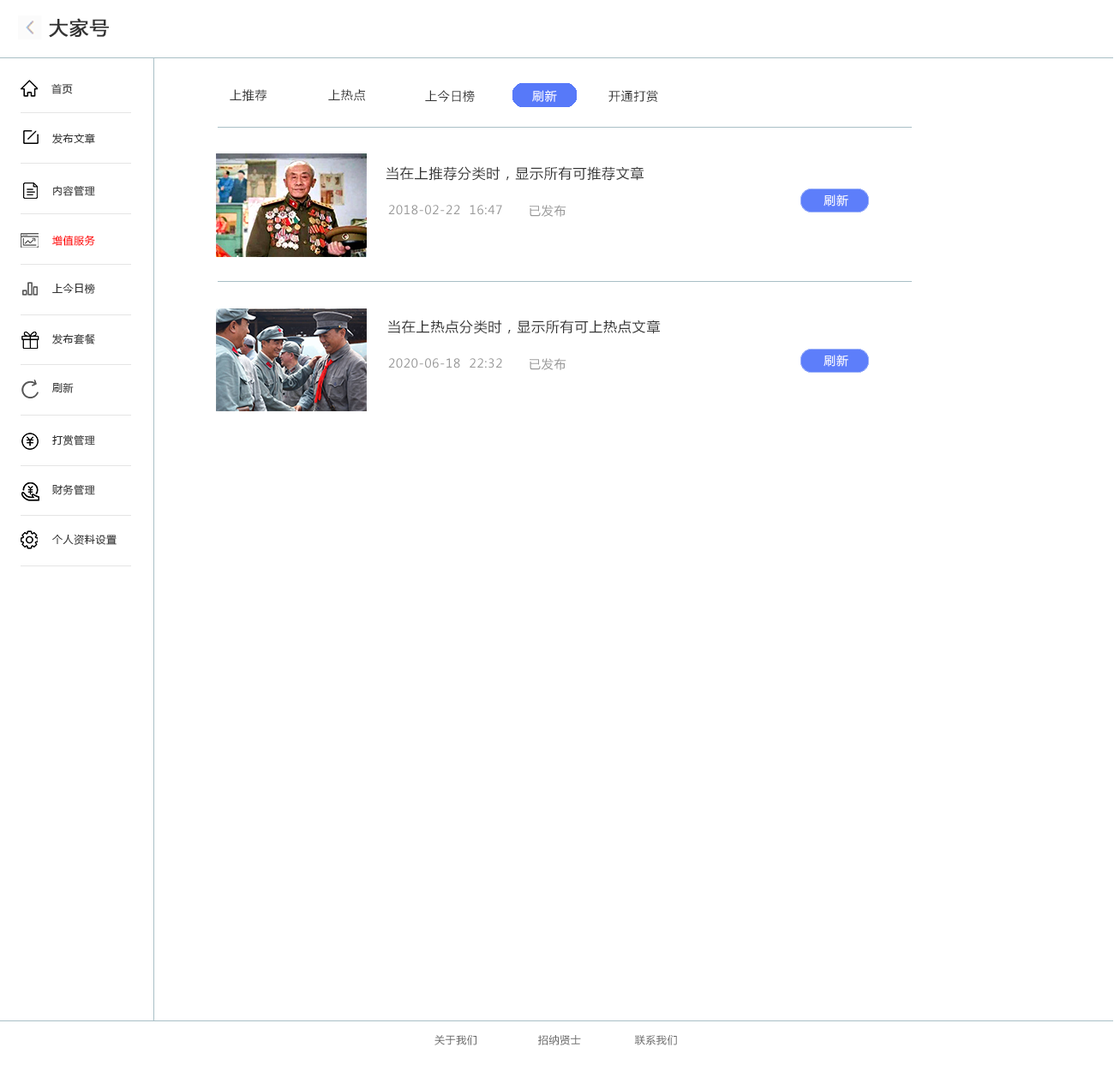
<style>
.page{position:relative;width:1114px;height:1071px;background:#ffffff}
.page>*{position:absolute;margin:0}
.t1{font:18.8px "MicrosoftYaHei";letter-spacing:0.05em;color:#333333;font-weight:bold}
.t2{font:10.3px "MicrosoftYaHei";letter-spacing:0.05em;color:#333333}
.t3{font:12px "MicrosoftYaHei";letter-spacing:0.05em;color:#333333}
.t4{font:12px "MicrosoftYaHei";letter-spacing:0.05em;color:#ffffff}
.t5{font:13.7px "MicrosoftYaHei";letter-spacing:0.05em;color:#333333}
.t6{font:12px "MicrosoftYaHei";letter-spacing:0.05em;color:#999999}
.t7{font:10.3px "MicrosoftYaHei";letter-spacing:0.05em;color:#ff0000}
.t8{font:10.3px "MicrosoftYaHei";letter-spacing:0.05em;color:#666666}
</style>
<div class="page">
<p class="t1" style="left:49px;top:18px;width:60px;height:20px">大家号</p>
<p class="t2" style="left:51px;top:83px;width:22px;height:11px">首页</p>
<p class="t3" style="left:230px;top:89px;width:36px;height:12px">上推荐</p>
<p class="t3" style="left:328px;top:89px;width:37px;height:12px">上热点</p>
<p class="t3" style="left:425px;top:90px;width:50px;height:12px">上今日榜</p>
<p class="t4" style="left:532px;top:90px;width:25px;height:12px">刷新</p>
<p class="t3" style="left:608px;top:90px;width:50px;height:12px">开通打赏</p>
<p class="t2" style="left:52px;top:133px;width:43px;height:11px">发布文章</p>
<p class="t5" style="left:385px;top:166px;width:259px;height:15px">当在上推荐分类时，显示所有可推荐文章</p>
<p class="t2" style="left:53px;top:185px;width:42px;height:11px">内容管理</p>
<p class="t4" style="left:823px;top:194px;width:25px;height:12px">刷新</p>
<p class="t6" style="left:388px;top:205px;width:114px;height:10px">2018-02-22  16:47</p>
<p class="t6" style="left:529px;top:205px;width:37px;height:12px">已发布</p>
<p class="t7" style="left:52px;top:235px;width:43px;height:11px">增值服务</p>
<p class="t2" style="left:52px;top:283px;width:43px;height:11px">上今日榜</p>
<p class="t5" style="left:387px;top:320px;width:273px;height:14px">当在上热点分类时，显示所有可上热点文章</p>
<p class="t2" style="left:52px;top:333px;width:43px;height:11px">发布套餐</p>
<p class="t6" style="left:388px;top:358px;width:114px;height:10px">2020-06-18  22:32</p>
<p class="t6" style="left:529px;top:358px;width:37px;height:12px">已发布</p>
<p class="t4" style="left:823px;top:355px;width:25px;height:12px">刷新</p>
<p class="t2" style="left:52px;top:383px;width:22px;height:10px">刷新</p>
<p class="t2" style="left:52px;top:434px;width:43px;height:11px">打赏管理</p>
<p class="t2" style="left:52px;top:484px;width:43px;height:11px">财务管理</p>
<p class="t2" style="left:52px;top:534px;width:65px;height:11px">个人资料设置</p>
<p class="t8" style="left:434px;top:1035px;width:243px;height:10px">关于我们                 招纳贤士               联系我们</p>
</div>
